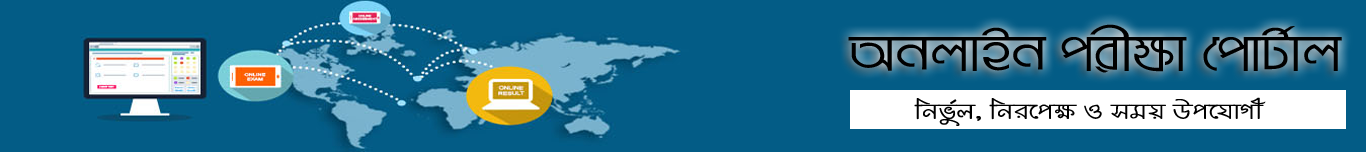
<style>
.page{position:relative;width:1366px;height:152px;background:#035c86}
.page>*{position:absolute;margin:0}
.t1{font:53.7px "BrahmaputraMJ-Regular";color:#000000;scale:1.24 1}
.t2{font:25px "MatamuhuriMJ-Bold";color:#000000;scale:1.35 1}
</style>
<div class="page">
<p class="t1" style="left:848px;top:24px;width:494px;height:49px">AbjvBb cixÿv †cvU©vj</p>
<p class="t2" style="left:914px;top:97px;width:352px;height:29px">wbfz©j, wbi‡cÿ I mgq Dc‡hvMx</p>
</div>
